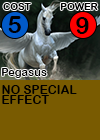
<style>
.page{position:relative;width:100px;height:140px;background:#795b01}
.page>*{position:absolute;margin:0}
.t1{font:9.7px "ArialRoundedMTBold";letter-spacing:0.01em;color:#000000}
.t2{font:24px "ArialRoundedMTBold";letter-spacing:0.01em;color:#000000}
.t3{font:11px "ArialRoundedMTBold";letter-spacing:0.01em;color:#000000}
.t4{font:12px/10px "ArialRoundedMTBold";letter-spacing:0.01em;color:#000000}
</style>
<div class="page">
<p class="t1" style="left:3px;top:3px;width:28px;height:7px">COST</p>
<p class="t1" style="left:60px;top:3px;width:38px;height:7px">POWER</p>
<p class="t2" style="left:8px;top:16px;width:13px;height:17px">5</p>
<p class="t2" style="left:76px;top:17px;width:13px;height:17px">9</p>
<p class="t3" style="left:2px;top:68px;width:45px;height:10px">Pegasus</p>
<p class="t4" style="left:2px;top:85px;width:75px;height:19px">NO SPECIAL <br>EFFECT</p>
</div>
